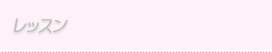
<style>
.page{position:relative;width:272px;height:52px;background:#fef1f9}
.page>*{position:absolute;margin:0}
.t1{font:16px "YentiEGP-Medium-SJIS";color:#bcbcbc;font-weight:bold;font-style:italic}
</style>
<div class="page">
<p class="t1" style="left:14px;top:18px;width:54px;height:15px">レッスン</p>
</div>
